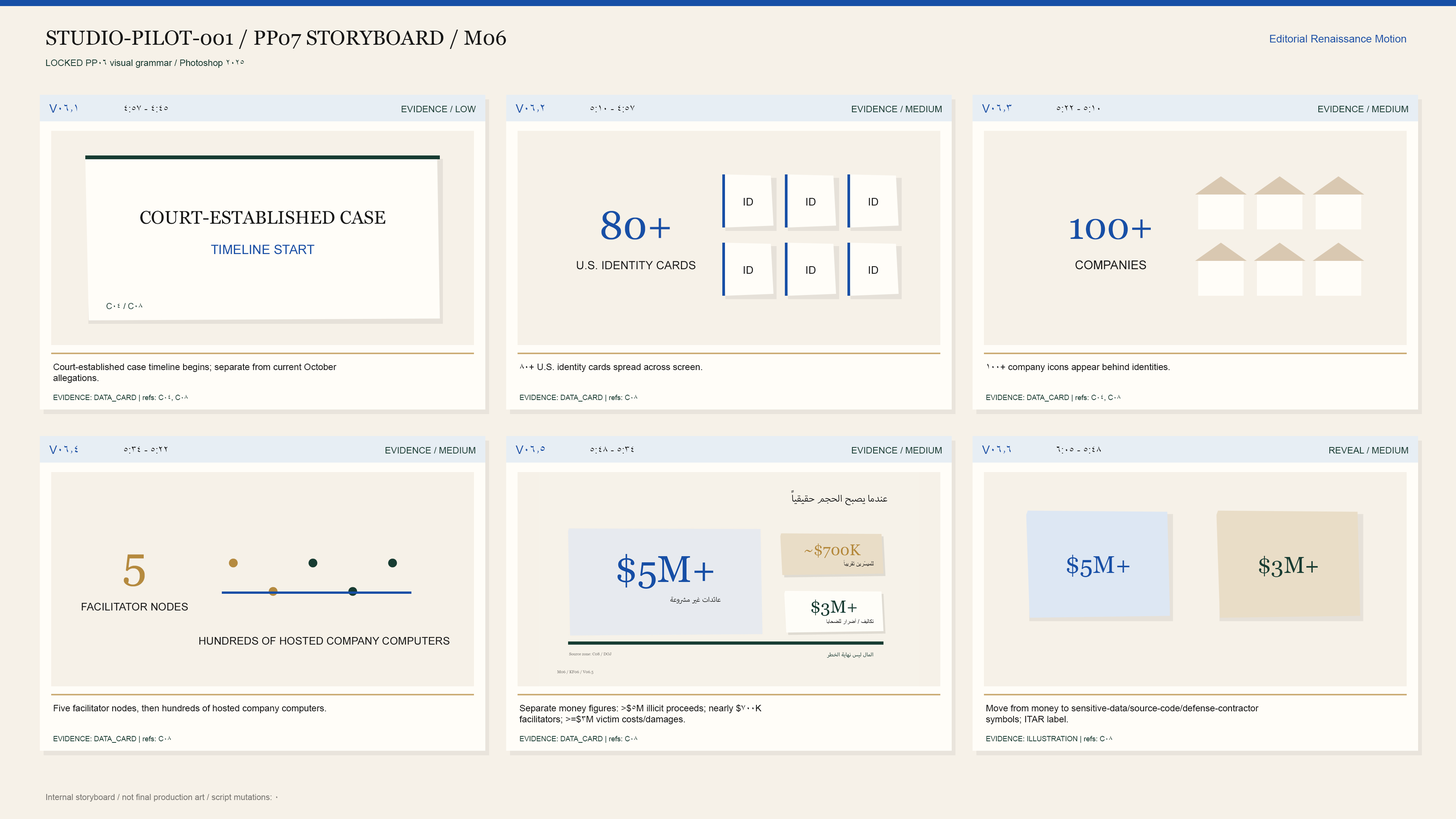
<style>
.page{position:relative;width:1456px;height:819px;background:#f6f1e8}
.page>*{position:absolute;margin:0}
.t1{font:20.5px "Georgia";color:#151515}
.t2{font:10.6px "ArialMT";color:#174fa6}
.t3{font:9.1px "ArialMT";color:#173c32}
.t4{font:11.8px "ArialMT";color:#174fa6}
.t5{font:9.9px "ArialMT";color:#151515}
.t6{font:10.6px "ArialMT";color:#151515}
.t7{font:18.2px "Georgia";color:#151515}
.t8{font:39.4px "Georgia";color:#174fa6}
.t9{font:37.2px "Georgia";color:#174fa6}
.t10{font:12.9px "ArialMT";color:#174fa6}
.t11{font:11.4px "ArialMT";color:#151515}
.t12{font:12.1px "ArialMT";color:#151515}
.t13{font:8.3px "ArialMT";color:#173c32}
.t14{font:9.1px "ArialMT";color:#151515}
.t15{font:7.2px "ArialMT";color:#173c32}
.t16{font:45.5px "Georgia";color:#b58a3e}
.t17{font:24.3px "Georgia";color:#174fa6}
.t18{font:22.7px "Georgia";color:#173c32}
.t19{font:20.5px "ArialMT";color:#b58a3e}
.t20{font:20.5px "ArialMT";color:#173c32}
.t21{font:8.3px "ArialMT";color:#7b7974}
</style>
<div class="page">
<p class="t1" style="left:46px;top:30px;width:460px;height:19px">STUDIO-PILOT-001 / PP07 STORYBOARD / M06</p>
<p class="t2" style="left:1270px;top:35px;width:136px;height:7px">Editorial Renaissance Motion</p>
<p class="t3" style="left:46px;top:59px;width:198px;height:9px">LOCKED PP06 visual grammar / Photoshop 2025</p>
<p class="t4" style="left:49px;top:104px;width:28px;height:9px">V06.1</p>
<p class="t5" style="left:124px;top:105px;width:44px;height:7px">4:45 - 4:57</p>
<p class="t3" style="left:402px;top:106px;width:74px;height:6px">EVIDENCE / LOW</p>
<p class="t4" style="left:516px;top:104px;width:28px;height:9px">V06.2</p>
<p class="t5" style="left:590px;top:105px;width:44px;height:7px">4:57 - 5:10</p>
<p class="t3" style="left:852px;top:106px;width:90px;height:6px">EVIDENCE / MEDIUM</p>
<p class="t4" style="left:982px;top:104px;width:30px;height:9px">V06.3</p>
<p class="t5" style="left:1057px;top:105px;width:43px;height:7px">5:10 - 5:22</p>
<p class="t3" style="left:1318px;top:106px;width:90px;height:6px">EVIDENCE / MEDIUM</p>
<p class="t6" style="left:744px;top:198px;width:9px;height:8px">ID</p>
<p class="t6" style="left:806px;top:198px;width:10px;height:8px">ID</p>
<p class="t6" style="left:869px;top:198px;width:9px;height:8px">ID</p>
<p class="t7" style="left:140px;top:211px;width:246px;height:13px">COURT-ESTABLISHED CASE</p>
<p class="t8" style="left:601px;top:211px;width:69px;height:29px">80+</p>
<p class="t9" style="left:1070px;top:219px;width:81px;height:21px">100+</p>
<p class="t10" style="left:211px;top:245px;width:103px;height:9px">TIMELINE START</p>
<p class="t11" style="left:577px;top:261px;width:118px;height:9px">U.S. IDENTITY CARDS</p>
<p class="t6" style="left:744px;top:266px;width:9px;height:8px">ID</p>
<p class="t6" style="left:806px;top:266px;width:10px;height:8px">ID</p>
<p class="t6" style="left:869px;top:266px;width:9px;height:8px">ID</p>
<p class="t12" style="left:1075px;top:260px;width:71px;height:10px">COMPANIES</p>
<p class="t13" style="left:107px;top:303px;width:35px;height:6px">C04 / C08</p>
<p class="t14" style="left:53px;top:363px;width:284px;height:20px">Court-established case timeline begins; separate from current October<br>allegations.</p>
<p class="t14" style="left:520px;top:363px;width:182px;height:9px">80+ U.S. identity cards spread across screen.</p>
<p class="t14" style="left:987px;top:363px;width:183px;height:9px">100+ company icons appear behind identities.</p>
<p class="t15" style="left:53px;top:395px;width:135px;height:7px">EVIDENCE: DATA_CARD | refs: C04, C08</p>
<p class="t15" style="left:520px;top:395px;width:117px;height:7px">EVIDENCE: DATA_CARD | refs: C08</p>
<p class="t15" style="left:986px;top:395px;width:134px;height:7px">EVIDENCE: DATA_CARD | refs: C04, C08</p>
<p class="t4" style="left:49px;top:446px;width:29px;height:8px">V06.4</p>
<p class="t5" style="left:124px;top:446px;width:44px;height:7px">5:22 - 5:34</p>
<p class="t3" style="left:385px;top:447px;width:90px;height:6px">EVIDENCE / MEDIUM</p>
<p class="t4" style="left:516px;top:446px;width:29px;height:8px">V06.5</p>
<p class="t5" style="left:590px;top:446px;width:44px;height:7px">5:34 - 5:48</p>
<p class="t3" style="left:852px;top:447px;width:90px;height:6px">EVIDENCE / MEDIUM</p>
<p class="t4" style="left:982px;top:446px;width:29px;height:8px">V06.6</p>
<p class="t5" style="left:1057px;top:446px;width:44px;height:7px">5:48 - 6:05</p>
<p class="t3" style="left:1329px;top:447px;width:79px;height:6px">REVEAL / MEDIUM</p>
<p class="t16" style="left:124px;top:554px;width:21px;height:33px">5</p>
<p class="t17" style="left:1067px;top:555px;width:63px;height:22px">$5M+</p>
<p class="t18" style="left:1259px;top:556px;width:59px;height:21px">$3M+</p>
<p class="t19" style="left:229px;top:559px;width:9px;height:9px">●</p>
<p class="t20" style="left:308px;top:559px;width:9px;height:9px">●</p>
<p class="t20" style="left:388px;top:559px;width:9px;height:9px">●</p>
<p class="t19" style="left:268px;top:587px;width:10px;height:9px">●</p>
<p class="t20" style="left:348px;top:587px;width:9px;height:9px">●</p>
<p class="t6" style="left:82px;top:602px;width:106px;height:9px">FACILITATOR NODES</p>
<p class="t6" style="left:199px;top:637px;width:251px;height:8px">HUNDREDS OF HOSTED COMPANY COMPUTERS</p>
<p class="t14" style="left:54px;top:704px;width:272px;height:9px">Five facilitator nodes, then hundreds of hosted company computers.</p>
<p class="t14" style="left:519px;top:704px;width:242px;height:20px">Separate money figures: &gt;$5M illicit proceeds; nearly $700K<br>facilitators; &gt;=$3M victim costs/damages.</p>
<p class="t14" style="left:986px;top:704px;width:273px;height:20px">Move from money to sensitive-data/source-code/defense-contractor<br>symbols; ITAR label.</p>
<p class="t15" style="left:53px;top:736px;width:118px;height:7px">EVIDENCE: DATA_CARD | refs: C08</p>
<p class="t15" style="left:520px;top:736px;width:117px;height:7px">EVIDENCE: DATA_CARD | refs: C08</p>
<p class="t15" style="left:986px;top:736px;width:126px;height:7px">EVIDENCE: ILLUSTRATION | refs: C08</p>
<p class="t21" style="left:46px;top:794px;width:232px;height:8px">Internal storyboard / not final production art / script mutations: 0</p>
</div>
